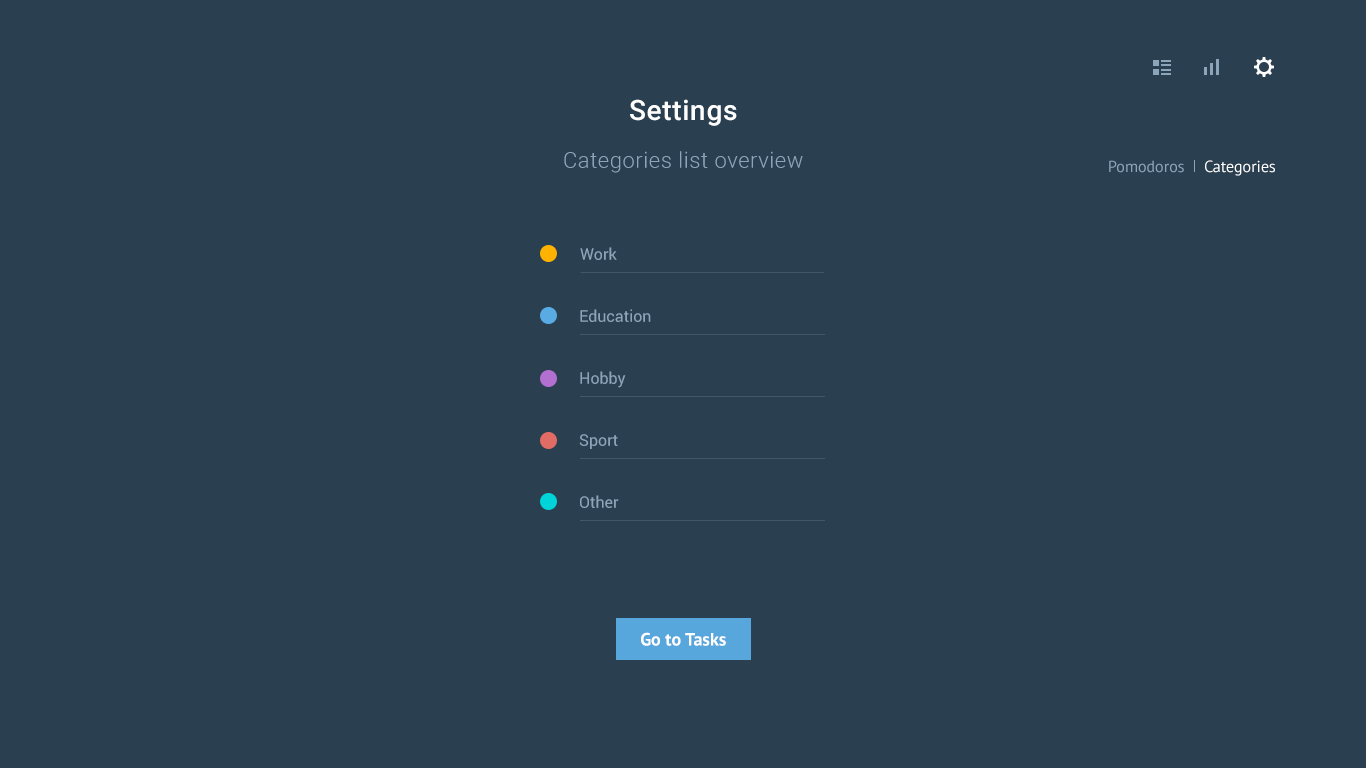
<style>
.page{position:relative;width:1366px;height:768px;background:#2a3f50}
.page>*{position:absolute;margin:0}
.t1{font:28px "Roboto-Medium";letter-spacing:0.025em;color:#ffffff}
.t2{font:22px "Roboto-Light";letter-spacing:0.025em;color:#8da5b8}
.t3{font:16px "PTSans-Regular";color:#8da5b8}
.t4{font:16px "PTSans-Regular";color:#ffffff}
.t5{font:16px "Roboto-Regular";color:#8da5b8}
.t6{font:18px "PTSans-Bold";color:#ffffff}
</style>
<div class="page">
<p class="t1" style="left:630px;top:99px;width:107px;height:27px">Settings</p>
<p class="t2" style="left:564px;top:151px;width:239px;height:22px">Сategories list overview</p>
<p class="t3" style="left:1109px;top:160px;width:75px;height:13px">Pomodoros</p>
<p class="t4" style="left:1205px;top:160px;width:70px;height:16px">Categories</p>
<p class="t5" style="left:580px;top:247px;width:37px;height:13px">Work</p>
<p class="t5" style="left:580px;top:309px;width:71px;height:13px">Education</p>
<p class="t5" style="left:580px;top:371px;width:46px;height:17px">Hobby</p>
<p class="t5" style="left:579px;top:434px;width:39px;height:15px">Sport</p>
<p class="t5" style="left:580px;top:495px;width:39px;height:13px">Other</p>
<p class="t6" style="left:641px;top:632px;width:85px;height:14px">Go to Tasks</p>
</div>
